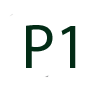
<style>
.page{position:relative;width:110px;height:110px;background:#ffffff}
.page>*{position:absolute;margin:0}
.t1{font:64px "MyriadHebrew-Regular";color:#022b15}
</style>
<div class="page">
<p class="t1" style="left:26px;top:25px;width:50px;height:43px">P1</p>
</div>
